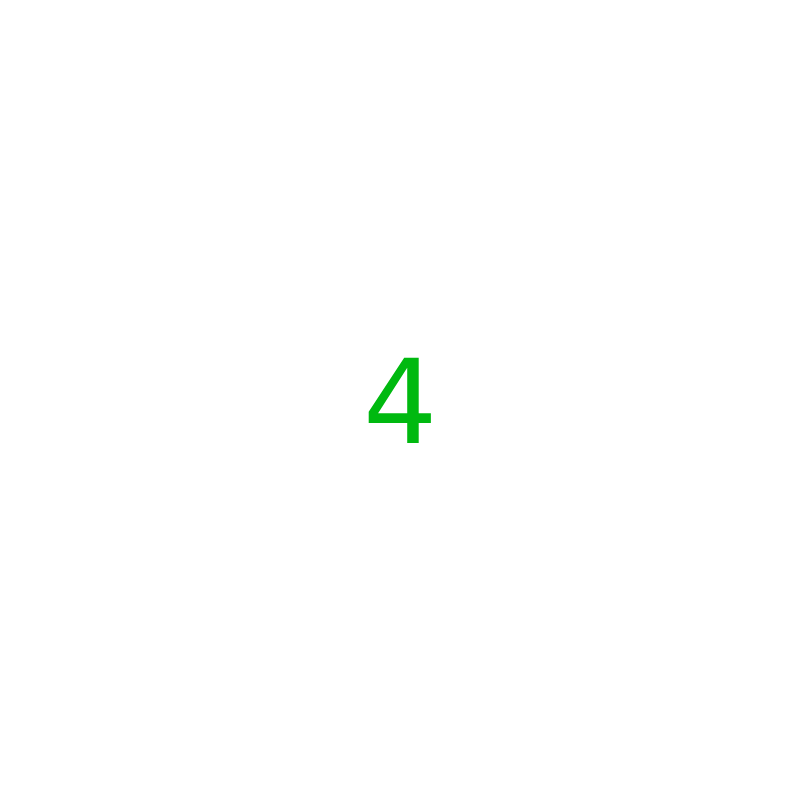
<style>
.page{position:relative;width:800px;height:800px;background:#ffffff}
.page>*{position:absolute;margin:0}
.t1{font:117px "DejaVuSans";color:#00b910}
</style>
<div class="page">
<p class="t1" style="left:368px;top:357px;width:63px;height:86px">4</p>
</div>
